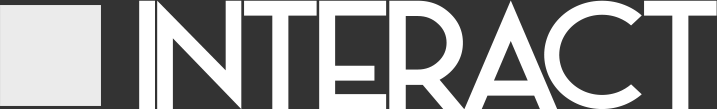
<style>
.page{position:relative;width:717px;height:109px;background:#333333}
.page>*{position:absolute;margin:0}
.t1{font:135.5px "AlpacaScarlettDemo";letter-spacing:-0.04em;color:#ffffff;scale:1.07 1}
</style>
<div class="page">
<p class="t1" style="left:139px;top:0px;width:578px;height:109px">INTERACT</p>
</div>
